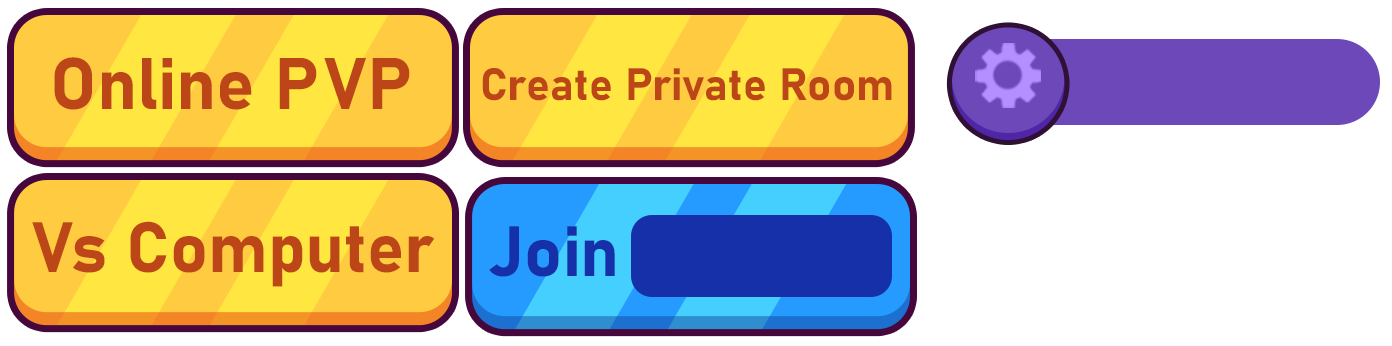
<style>
.page{position:relative;width:1392px;height:346px;background:#ffffff}
.page>*{position:absolute;margin:0}
.t1{font:72px "Bahnschrift-Bold";color:#bc4618;font-weight:bold}
.t2{font:44.7px "Bahnschrift-Bold";color:#bc4618;font-weight:bold}
.t3{font:69.9px "Bahnschrift-Bold";color:#bc4618;font-weight:bold}
.t4{font:69.9px "Bahnschrift-Bold";color:#1530a9;font-weight:bold}
</style>
<div class="page">
<p class="t1" style="left:54px;top:57px;width:356px;height:53px">Online PVP</p>
<p class="t2" style="left:482px;top:68px;width:410px;height:33px">Create Private Room</p>
<p class="t3" style="left:32px;top:221px;width:403px;height:66px">Vs Computer</p>
<p class="t4" style="left:489px;top:226px;width:126px;height:51px">Join</p>
</div>
